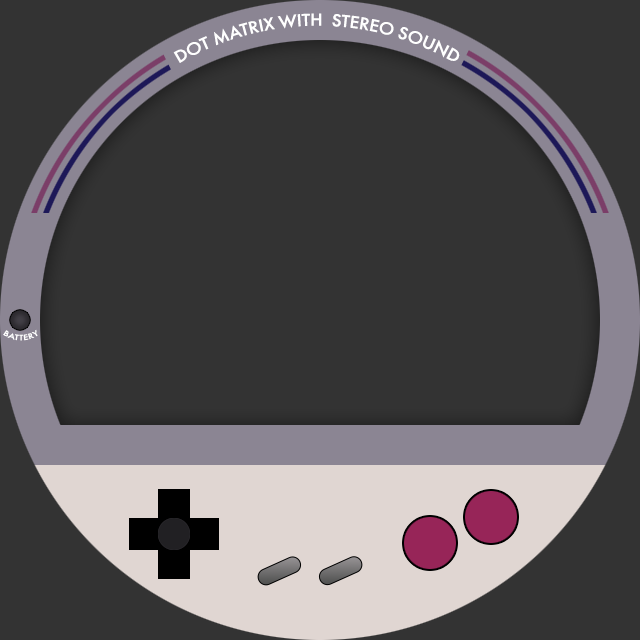
<style>
.page{position:relative;width:640px;height:640px;background:#333333}
.page>*{position:absolute;margin:0}
.t1{font:18px "FuturaCyrillicMedium";color:#ffffff}
.t2{font:8px "FuturaCyrillicMedium";color:#ffffff}
</style>
<div class="page">
<p class="t1" style="left:173px;top:13px;width:287px;height:50px;text-align:center">DOT MATRIX WITH  STEREO SOUND</p>
<p class="t2" style="left:3px;top:329px;width:35px;height:12px">BATTERY</p>
</div>
